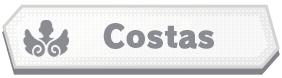
<style>
.page{position:relative;width:282px;height:78px}
.page>*{position:absolute;margin:0}
.t1{font:30.7px "RodinPro-UB";color:#8b8c92}
</style>
<div class="page">
<p class="t1" style="left:103px;top:23px;width:111px;height:26px">Costas</p>
</div>
